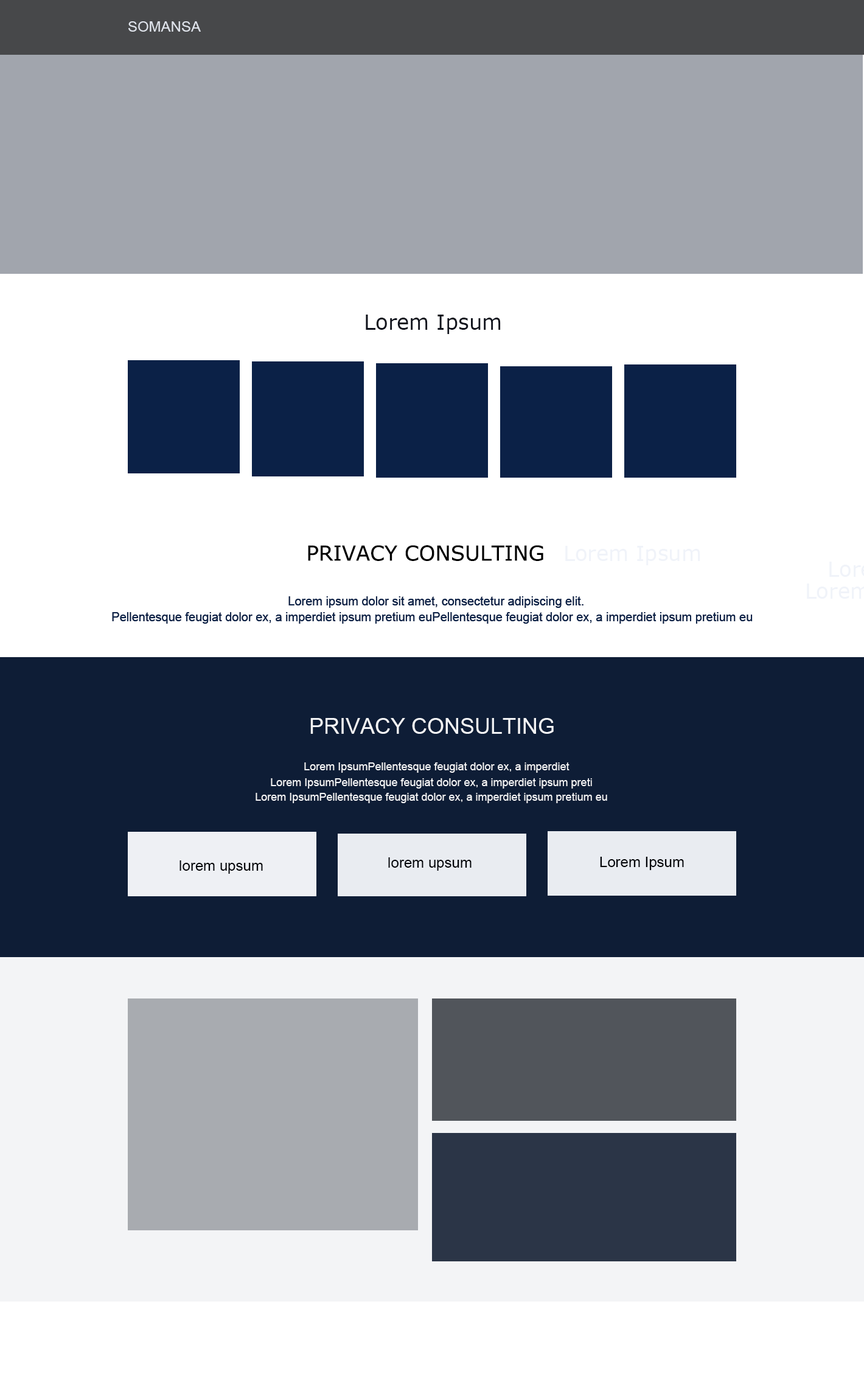
<style>
.page{position:relative;width:864px;height:1380px;background:#ffffff}
.page>*{position:absolute;margin:0}
.t1{font:14.6px "ArialMT";color:#dfe3eb}
.t2{font:20.7px "Verdana";color:#11141d}
.t3{font:20.7px "Verdana";color:#000000}
.t4{font:20.7px "Verdana";color:#f0f3f9}
.t5{font:12.2px "ArialMT";color:#0b2147}
.t6{font:21.9px "ArialMT";color:#f3f4f6}
.t7{font:11px "ArialMT";color:#f3f4f6}
.t8{font:14.6px "ArialMT";color:#010308}
</style>
<div class="page">
<p class="t1" style="left:128px;top:21px;width:73px;height:11px">SOMANSA</p>
<p class="t2" style="left:366px;top:315px;width:135px;height:19px">Lorem Ipsum</p>
<p class="t3" style="left:308px;top:545px;width:235px;height:16px">PRIVACY CONSULTING</p>
<p class="t4" style="left:565px;top:546px;width:135px;height:19px">Lorem Ipsum</p>
<p class="t5" style="left:288px;top:596px;width:296px;height:12px">Lorem ipsum dolor sit amet, consectetur adipiscing elit.</p>
<p class="t5" style="left:288px;top:596px;width:296px;height:12px">Lorem ipsum dolor sit amet, consectetur adipiscing elit.</p>
<p class="t5" style="left:112px;top:612px;width:641px;height:12px">Pellentesque feugiat dolor ex, a imperdiet ipsum pretium euPellentesque feugiat dolor ex, a imperdiet ipsum pretium eu</p>
<p class="t5" style="left:112px;top:612px;width:641px;height:12px">Pellentesque feugiat dolor ex, a imperdiet ipsum pretium euPellentesque feugiat dolor ex, a imperdiet ipsum pretium eu</p>
<p class="t6" style="left:310px;top:718px;width:244px;height:16px">PRIVACY CONSULTING</p>
<p class="t7" style="left:304px;top:762px;width:266px;height:11px">Lorem IpsumPellentesque feugiat dolor ex, a imperdiet</p>
<p class="t7" style="left:271px;top:778px;width:321px;height:11px">Lorem IpsumPellentesque feugiat dolor ex, a imperdiet ipsum preti</p>
<p class="t7" style="left:256px;top:793px;width:351px;height:10px">Lorem IpsumPellentesque feugiat dolor ex, a imperdiet ipsum pretium eu</p>
<p class="t8" style="left:388px;top:857px;width:84px;height:14px">lorem upsum</p>
<p class="t8" style="left:600px;top:857px;width:84px;height:13px">Lorem Ipsum</p>
<p class="t8" style="left:180px;top:860px;width:83px;height:14px">lorem upsum</p>
</div>
